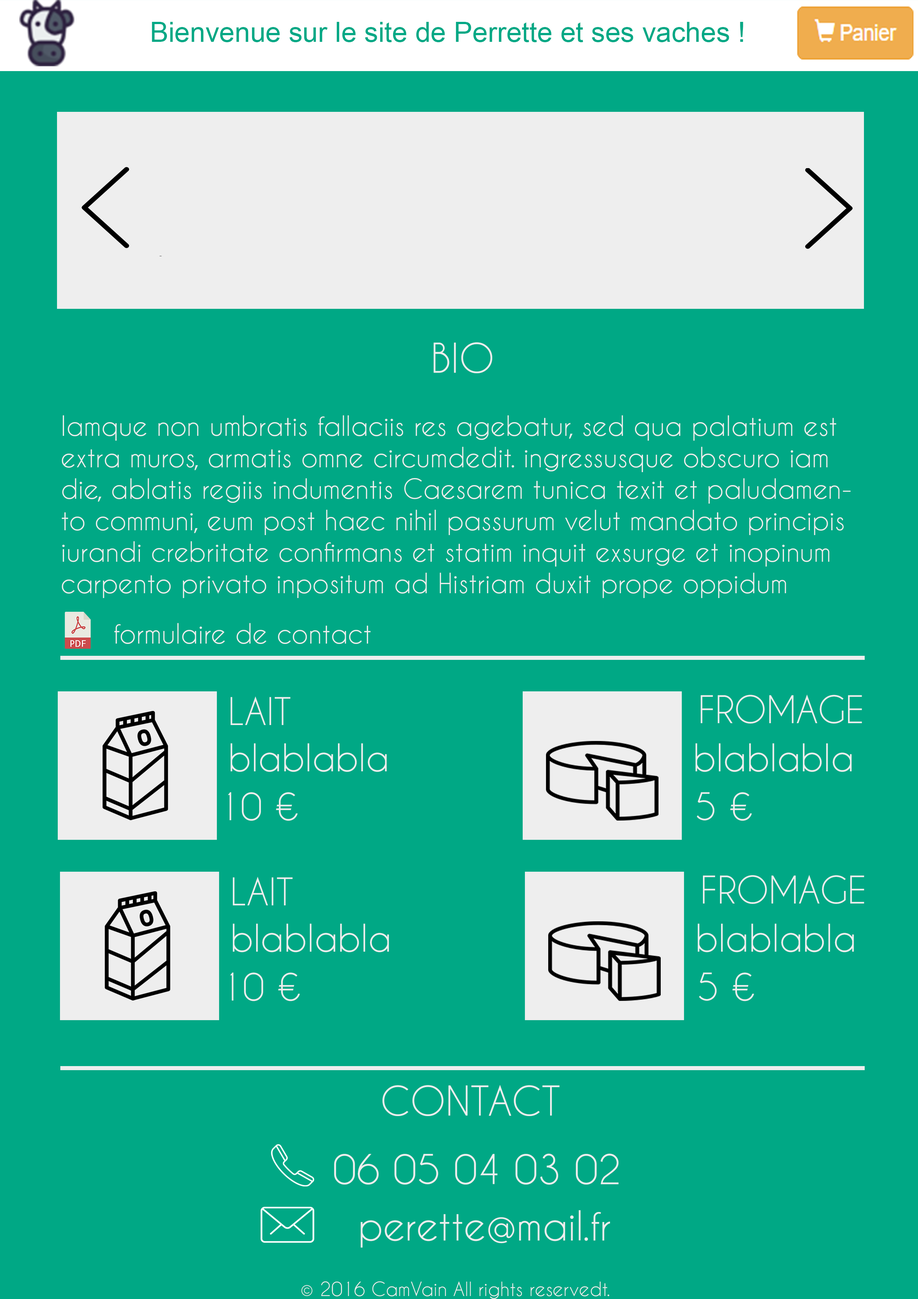
<style>
.page{position:relative;width:918px;height:1299px;background:#00a885}
.page>*{position:absolute;margin:0}
.t1{font:27.8px "ArialMT";color:#00a885}
.t2{font:26.2px "CaviarDreams";color:#eeeeee}
.t3{font:38.6px "CaviarDreams";color:#eeeeee}
.t4{font:35.8px "CaviarDreams";color:#eeeeee}
.t5{font:18.5px "CaviarDreams";color:#eeeeee}
</style>
<div class="page">
<p class="t1" style="left:152px;top:22px;width:591px;height:20px">Bienvenue sur le site de Perrette et ses vaches !</p>
<p class="t2" style="left:62px;top:342px;width:789px;height:256px;text-align:center"><span class="t3">BIO<br></span><br>Iamque non umbratis fallaciis res agebatur, sed qua palatium est extra muros, armatis omne circumdedit. ingressusque obscuro iam die, ablatis regiis indumentis Caesarem tunica texit et paludamento communi, eum post haec nihil passurum velut mandato principis iurandi crebritate confirmans et statim inquit exsurge et inopinum carpento privato inpositum ad Histriam duxit prope oppidum Polam, ubi quondam peremptum Constantini filium accepimus Crispum.</p>
<p class="t2" style="left:114px;top:623px;width:257px;height:21px">formulaire de contact</p>
<p class="t4" style="left:231px;top:696px;width:60px;height:29px">LAIT</p>
<p class="t4" style="left:701px;top:694px;width:161px;height:29px">FROMAGE</p>
<p class="t4" style="left:231px;top:743px;width:156px;height:29px">blablabla</p>
<p class="t4" style="left:696px;top:743px;width:156px;height:29px">blablabla</p>
<p class="t4" style="left:228px;top:792px;width:70px;height:29px">10 €</p>
<p class="t4" style="left:697px;top:792px;width:55px;height:29px">5 €</p>
<p class="t4" style="left:233px;top:876px;width:60px;height:29px">LAIT</p>
<p class="t4" style="left:703px;top:874px;width:161px;height:30px">FROMAGE</p>
<p class="t4" style="left:233px;top:923px;width:156px;height:29px">blablabla</p>
<p class="t4" style="left:698px;top:923px;width:156px;height:29px">blablabla</p>
<p class="t4" style="left:230px;top:972px;width:70px;height:29px">10 €</p>
<p class="t4" style="left:699px;top:972px;width:55px;height:29px">5 €</p>
<p class="t3" style="left:382px;top:1084px;width:178px;height:32px">CONTACT</p>
<p class="t3" style="left:334px;top:1153px;width:285px;height:32px">06 05 04 03 02</p>
<p class="t3" style="left:361px;top:1210px;width:249px;height:38px">perette@mail.fr</p>
<p class="t5" style="left:301px;top:1281px;width:308px;height:18px">© 2016 CamVain All rights reservedt.</p>
</div>
